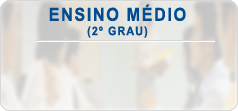
<style>
.page{position:relative;width:238px;height:111px}
.page>*{position:absolute;margin:0}
.t1{font:18px "Arial-BoldMT";letter-spacing:0.1em;color:#024d91;scale:0.9 1}
.t2{font:12px "Arial-BoldMT";letter-spacing:0.1em;color:#024d91;scale:0.9 1}
</style>
<div class="page">
<p class="t1" style="left:49px;top:4px;width:137px;height:34px;text-align:center">ENSINO MÉDIO<br><span class="t2">(2º GRAU)</span></p>
</div>
